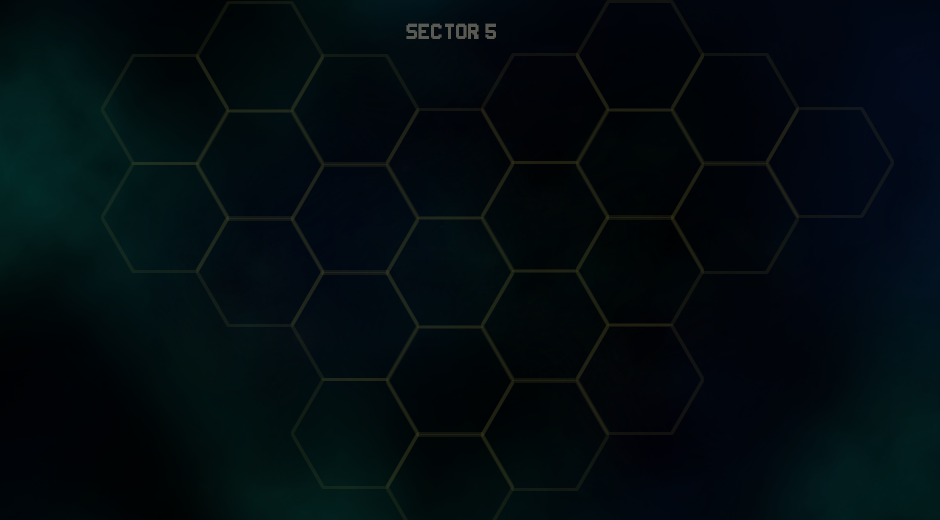
<style>
.page{position:relative;width:940px;height:520px}
.page>*{position:absolute;margin:0}
.t1{font:24.2px "Super-Smash-TV";letter-spacing:0.01em;color:#595a53}
</style>
<div class="page">
<p class="t1" style="left:406px;top:23px;width:90px;height:16px">sector 5</p>
</div>
